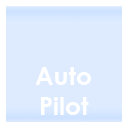
<style>
.page{position:relative;width:128px;height:128px;background:#deebff}
.page>*{position:absolute;margin:0}
.t1{font:25px "CenturyGothic-Bold";color:#ffffff}
</style>
<div class="page">
<p class="t1" style="left:35px;top:67px;width:56px;height:48px;text-align:center">Auto<br>Pilot</p>
</div>
